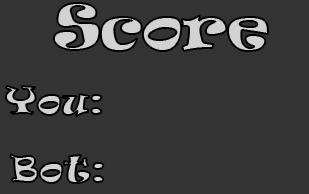
<style>
.page{position:relative;width:309px;height:194px;background:#333333}
.page>*{position:absolute;margin:0}
.t1{font:57.5px "Ravie";color:#d2d2d2}
.t2{font:34.5px "Ravie"}
</style>
<div class="page">
<p class="t1" style="left:53px;top:3px;width:215px;height:48px">Score</p>
<p class="t2" style="left:5px;top:86px;width:97px;height:30px">You:</p>
<p class="t2" style="left:10px;top:154px;width:94px;height:29px">Bot:</p>
</div>
